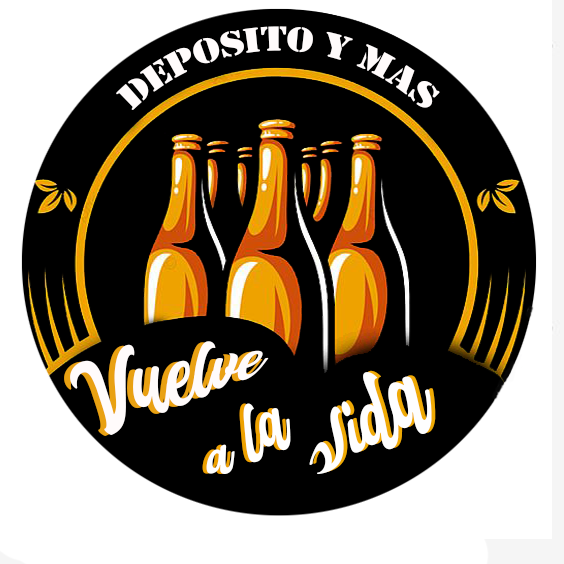
<style>
.page{position:relative;width:564px;height:564px;background:#000000}
.page>*{position:absolute;margin:0}
.t1{font:36px "Stencil";color:#fffbfb}
.t2{font:60px "LasAmericasPERSONALUSE-Regular"}
.t3{font:60px "LasAmericasPERSONALUSE-Regular";color:#fffbfb}
.t4{font:60px "LasAmericasPERSONALUSE-Regular";color:#fefefe}
.t5{font:60px "LasAmericasPERSONALUSE-Regular";color:#fffffe}
</style>
<div class="page">
<p class="t1" style="left:116px;top:26px;width:324px;height:84px">deposito y mas</p>
<p class="t2" style="left:64px;top:342px;width:199px;height:94px;rotate:-16deg">Vuelve</p>
<p class="t3" style="left:70px;top:341px;width:199px;height:94px;rotate:-16deg">Vuelve</p>
<p class="t4" style="left:309px;top:372px;width:123px;height:103px;rotate:-32deg">Vida</p>
<p class="t2" style="left:313px;top:370px;width:123px;height:103px;rotate:-32deg">Vida</p>
<p class="t2" style="left:202px;top:403px;width:85px;height:71px;rotate:-29deg">a la</p>
<p class="t5" style="left:206px;top:403px;width:85px;height:71px;rotate:-29deg">a la</p>
</div>
